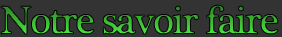
<style>
.page{position:relative;width:282px;height:37px;background:#333333}
.page>*{position:absolute;margin:0}
.t1{font:40px "PlantagenetCherokee";letter-spacing:-0.07em;font-weight:bold}
</style>
<div class="page">
<p class="t1" style="left:0px;top:4px;width:279px;height:31px">Notre savoir faire</p>
</div>
